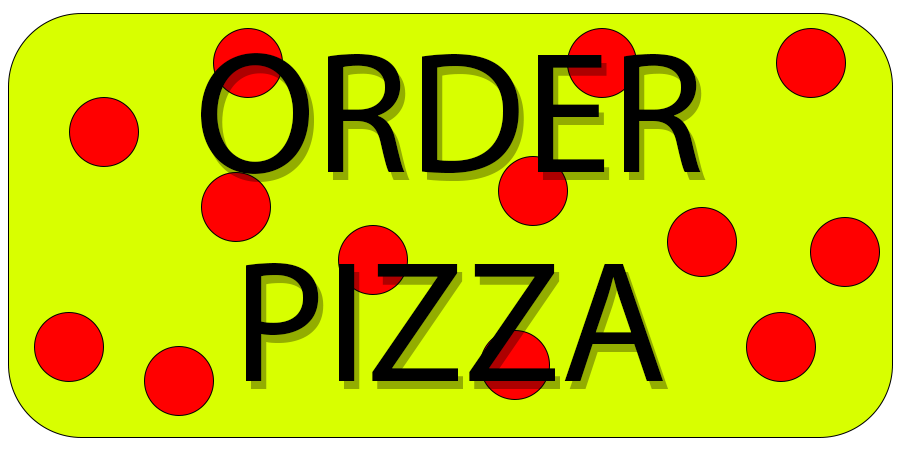
<style>
.page{position:relative;width:900px;height:450px;background:#d8ff00}
.page>*{position:absolute;margin:0}
.t1{font:174.3px "MyriadPro-Regular";color:#000000}
</style>
<div class="page">
<p class="t1" style="left:201px;top:53px;width:500px;height:328px;text-align:center">ORDER<br>PIZZA</p>
</div>
